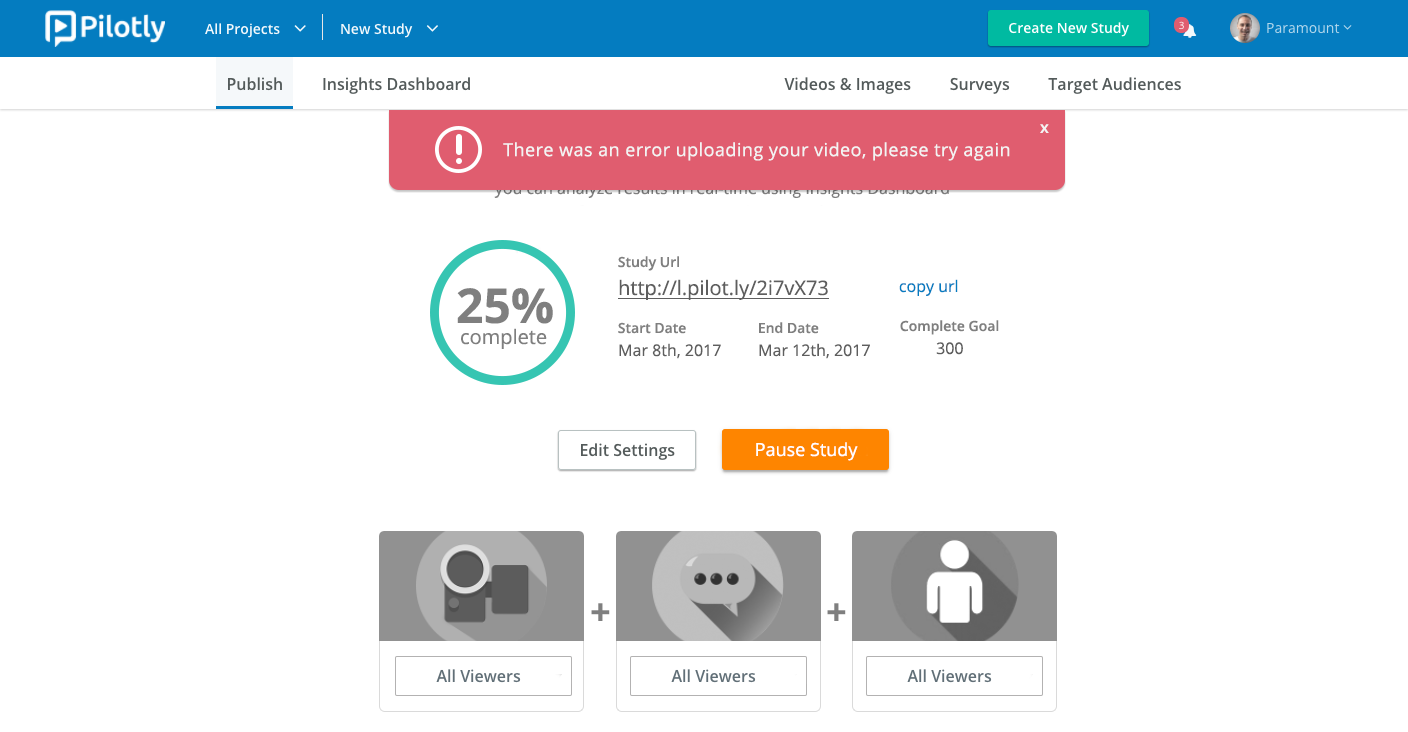
<style>
.page{position:relative;width:1408px;height:732px;background:#ffffff}
.page>*{position:absolute;margin:0}
.t1{font:16px "OpenSans-Semibold";letter-spacing:0.025em;color:#f3f3f3}
.t2{font:18px "OpenSans";letter-spacing:0.025em;color:#f3f3f3}
.t3{font:16px "OpenSans"}
.t4{font:14px "OpenSans-Semibold";color:#7f7f7f}
.t5{font:20px "OpenSans";color:#5e5e5e;text-decoration:underline}
.t6{font:16px "OpenSans";color:#047cc0}
.t7{font:48px "OpenSans-Bold";color:#7f7f7f}
.t8{font:20px "OpenSans";color:#7f7f7f}
.t9{font:16px "OpenSans";color:#5e5e5e}
.t10{font:18px "OpenSans";color:#ffffff}
.t11{font:36px "OpenSans-Bold";color:#7f7f7f}
</style>
<div class="page">
<p class="t1" style="left:1040px;top:124px;width:9px;height:9px">x</p>
<p class="t2" style="left:503px;top:142px;width:507px;height:19px">There was an error uploading your video, please try again</p>
<p class="t3" style="left:494px;top:181px;width:455px;height:17px">you can analyze results in real-time using Insights Dashboard</p>
<p class="t4" style="left:618px;top:256px;width:61px;height:15px">Study Url</p>
<p class="t5" style="left:618px;top:279px;width:211px;height:21px">http://l.pilot.ly/2i7vX73</p>
<p class="t6" style="left:899px;top:279px;width:59px;height:17px">copy url</p>
<p class="t7" style="left:457px;top:288px;width:96px;height:36px">25%</p>
<p class="t8" style="left:461px;top:328px;width:86px;height:21px">complete</p>
<p class="t4" style="left:618px;top:322px;width:68px;height:12px">Start Date</p>
<p class="t4" style="left:759px;top:322px;width:60px;height:12px">End Date</p>
<p class="t4" style="left:900px;top:320px;width:99px;height:15px">Complete Goal</p>
<p class="t9" style="left:936px;top:342px;width:27px;height:13px">300</p>
<p class="t9" style="left:619px;top:343px;width:102px;height:16px">Mar 8th, 2017</p>
<p class="t9" style="left:759px;top:343px;width:111px;height:16px">Mar 12th, 2017</p>
<p class="t10" style="left:756px;top:442px;width:102px;height:19px">Pause Study</p>
<p class="t11" style="left:591px;top:603px;width:19px;height:18px">+</p>
<p class="t11" style="left:827px;top:603px;width:19px;height:18px">+</p>
</div>
